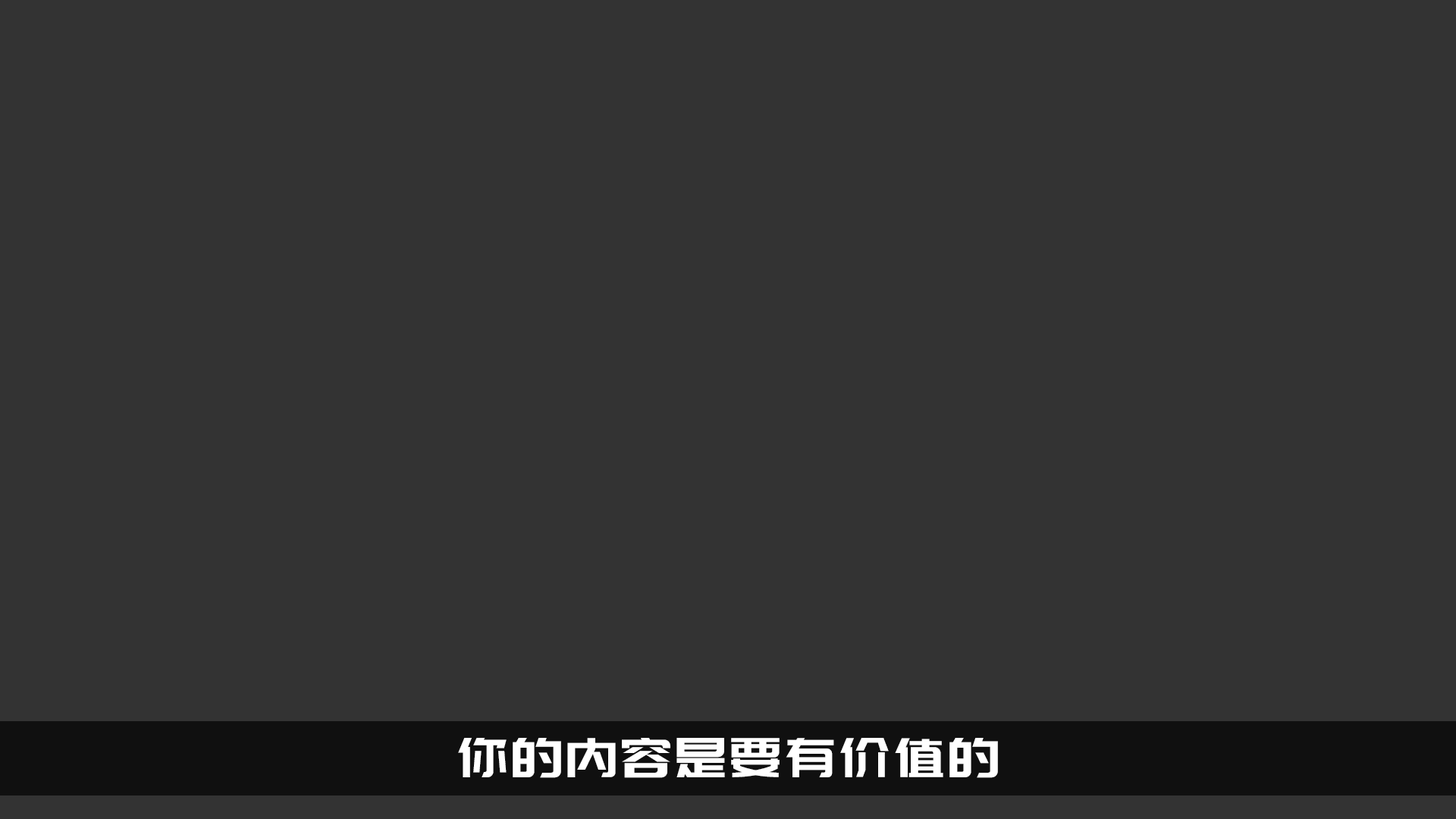
<style>
.page{position:relative;width:1456px;height:819px;background:#333333}
.page>*{position:absolute;margin:0}
.t1{font:54.6px "PangMenZhengDao-3";color:#ffffff}
</style>
<div class="page">
<p class="t1" style="left:458px;top:738px;width:540px;height:40px">你的内容是要有价值的</p>
</div>
